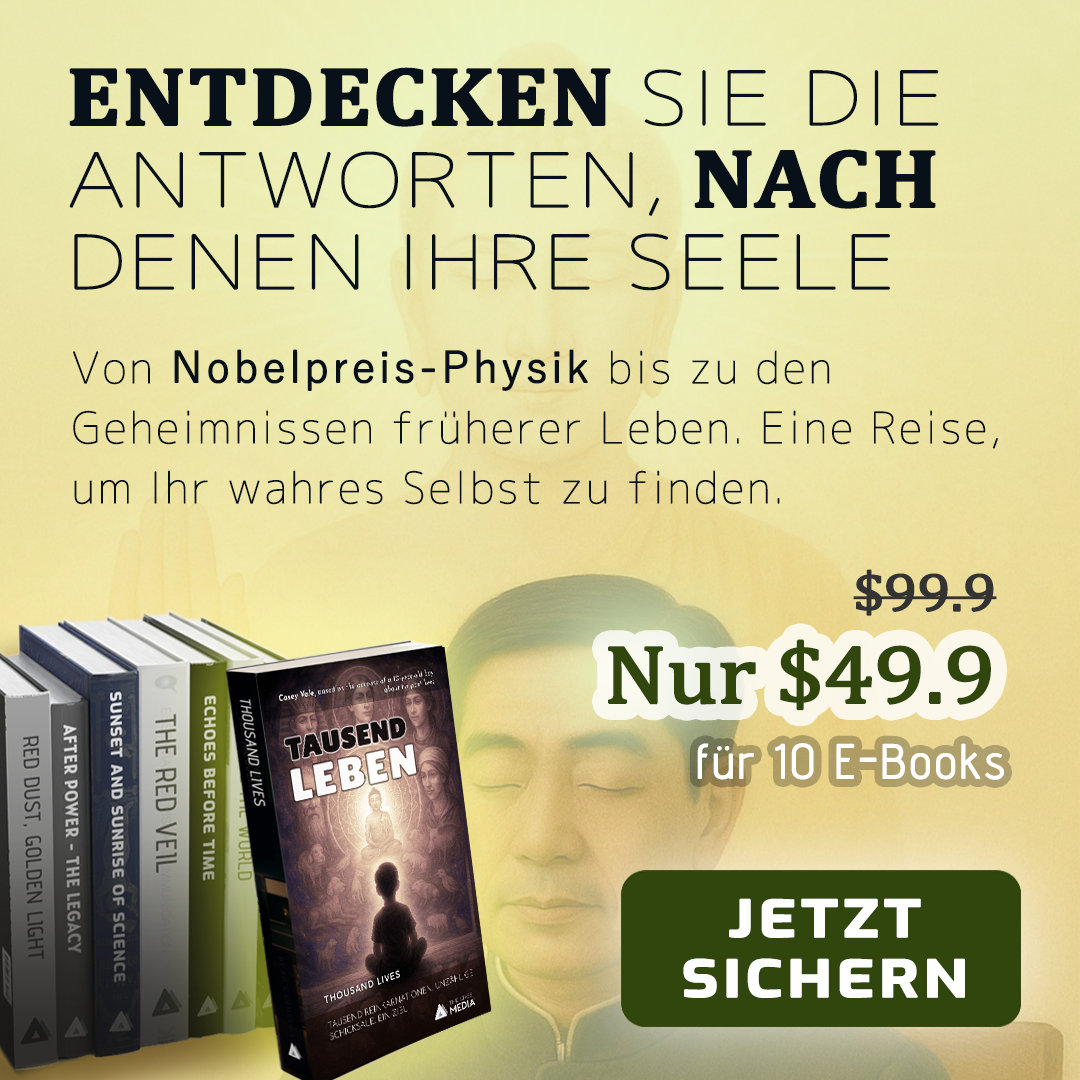
<style>
.page{position:relative;width:1080px;height:1080px}
.page>*{position:absolute;margin:0}
.t1{font:73.6px/82px "Chogokuboso-Gothic";letter-spacing:0.005em;color:#08101a;font-weight:bold;scale:1.25 1}
.t2{font:82.8px/82px "Cambria-Bold";letter-spacing:0.005em;color:#08101a;font-weight:bold;scale:1.11 1}
.t3{font:73.6px/82px "Cambria-Bold";letter-spacing:0.005em;color:#08101a;font-weight:bold;scale:1.25 1}
.t4{font:43.2px/60px "Chogokuboso-Gothic";letter-spacing:0.05em;color:#08101a;font-weight:bold}
.t5{font:43.2px/60px "YuGothic-Regular";letter-spacing:0.05em;color:#08101a;font-weight:bold}
.t6{font:54px "Cambria";letter-spacing:-0.025em;color:#333333;font-weight:bold;scale:1.11 1}
.t7{font:82.8px "Cambria";letter-spacing:-0.025em;color:#31460c;font-weight:bold;scale:1.11 1}
.t8{font:54px "Cambria";letter-spacing:-0.025em;color:#31460c;font-weight:bold;scale:1.11 1}
.t9{font:48px "AdventPro-Regular";letter-spacing:0.05em;color:#ffffff;font-weight:bold}
.t10{font:50.4px/60px "Exo-Bold";letter-spacing:0.05em;color:#fefefe;font-weight:bold;scale:1.25 1}
</style>
<div class="page">
<p class="t1" style="left:69px;top:67px;width:870px;height:224px"><span class="t2">ENTDECKEN </span>SIE DIE ANTWORTEN, <span class="t2">NACH </span>DENEN IHRE SEELE <span class="t3">SUCHT</span></p>
<p class="t4" style="left:73px;top:349px;width:925px;height:156px">Von <span class="t5">Nobelpreis-Physik </span>bis zu den Geheimnissen früherer Leben. Eine Reise, um Ihr wahres Selbst zu finden.</p>
<p class="t6" style="left:853px;top:569px;width:144px;height:47px">$99.9</p>
<p class="t7" style="left:608px;top:639px;width:383px;height:72px"><span class="t8"><br></span>Nur $49.9</p>
<p class="t9" style="left:697px;top:743px;width:307px;height:37px">für 10 E-Books</p>
<p class="t10" style="left:683px;top:898px;width:282px;height:100px;text-align:center">JETZT SICHERN</p>
</div>
